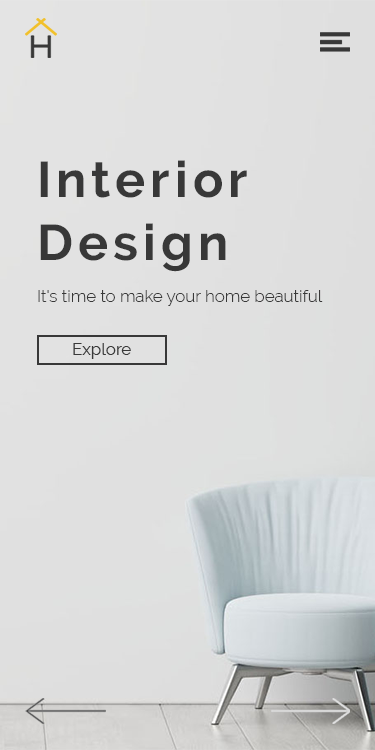
<style>
.page{position:relative;width:375px;height:750px}
.page>*{position:absolute;margin:0}
.t1{font:50px/63px "Raleway-Bold";letter-spacing:0.1em;color:#383838}
.t2{font:16.7px "Raleway-Light";color:#383838}
.t3{font:16.7px "Raleway-Regular";color:#383838}
</style>
<div class="page">
<p class="t1" style="left:40px;top:160px;width:207px;height:112px;text-align:justify">Interior<br>Design</p>
<p class="t2" style="left:38px;top:290px;width:285px;height:16px">It's time to make your home beautiful</p>
<p class="t3" style="left:73px;top:343px;width:58px;height:16px">Explore</p>
</div>
